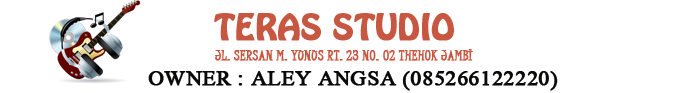
<style>
.page{position:relative;width:700px;height:93px;background:#ffffff}
.page>*{position:absolute;margin:0}
.t1{font:32.1px "HoboStd";color:#c85741;text-transform:uppercase;font-weight:bold}
.t2{font:13.5px "JuiceITC-Regular";color:#c85741;text-transform:uppercase;font-weight:bold;scale:1.27 1}
.t3{font:32.1px "MicrosoftHimalaya";color:#0a0a09;text-transform:uppercase;font-weight:bold}
</style>
<div class="page">
<p class="t1" style="left:214px;top:13px;width:240px;height:28px">teras studio</p>
<p class="t2" style="left:215px;top:49px;width:258px;height:12px">Jl. Sersan M. Yunus RT. 23 No. 02 Thehok Jambi</p>
<p class="t3" style="left:148px;top:71px;width:410px;height:20px">Owner : Aley Angsa (085266122220)</p>
</div>
